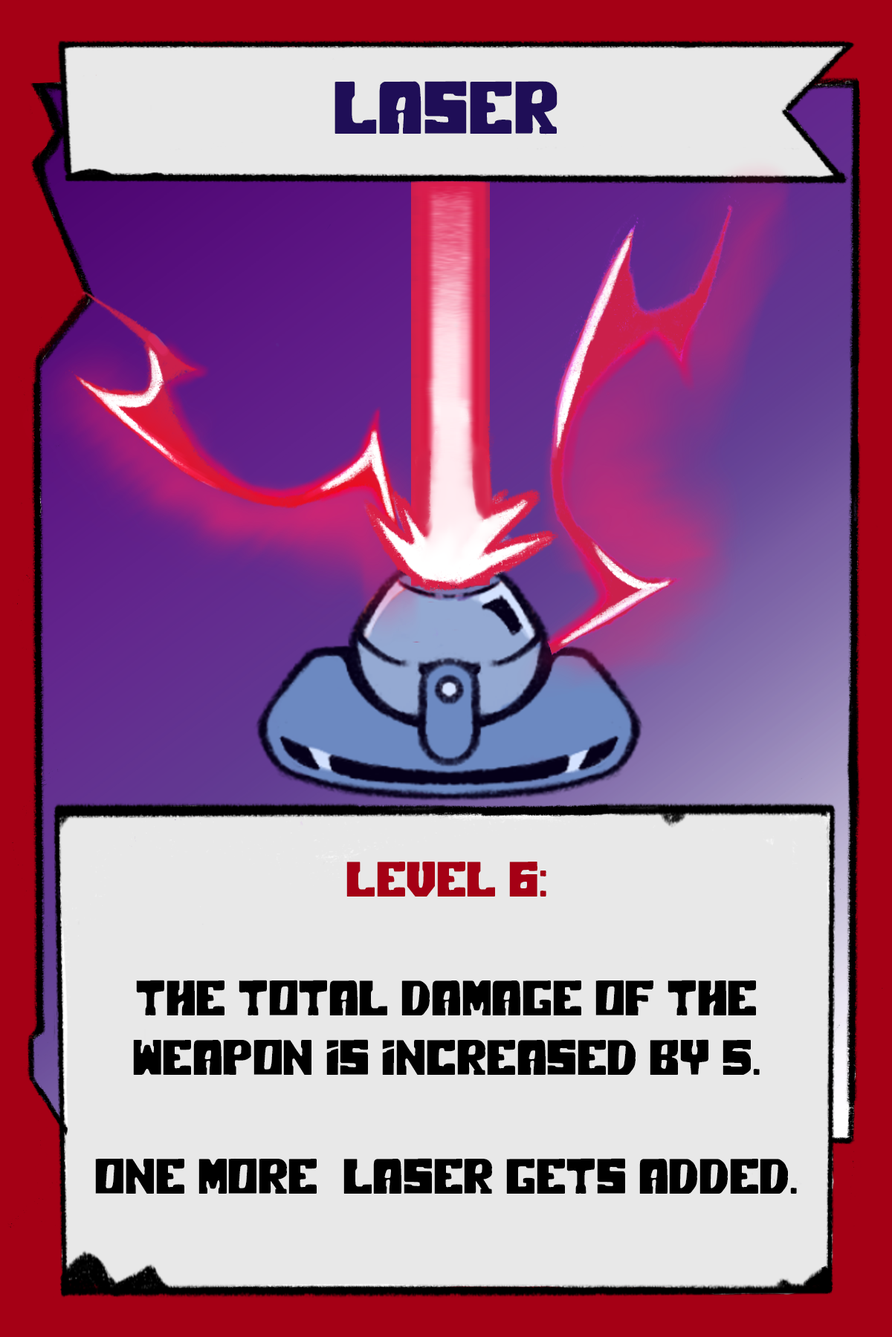
<style>
.page{position:relative;width:892px;height:1337px;background:#e8e8e8}
.page>*{position:absolute;margin:0}
.t1{font:74.3px "PolarPress";color:#1f0e57}
.t2{font:49.5px "PolarPress";color:#000000}
.t3{font:49.5px "PolarPress";color:#a50015}
</style>
<div class="page">
<p class="t1" style="left:334px;top:81px;width:223px;height:53px">LASER</p>
<p class="t2" style="left:95px;top:862px;width:701px;height:332px;text-align:center"><span class="t3">LEVEL 6:<br><br></span>The total damage of the weapon is increased by 5.<br><br>One more  laser gets added.</p>
</div>
